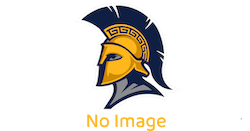
<style>
.page{position:relative;width:250px;height:131px;background:#ffffff}
.page>*{position:absolute;margin:0}
.t1{font:20px "BalooPaaji2-Regular";color:#ffb71b}
</style>
<div class="page">
<p class="t1" style="left:87px;top:114px;width:79px;height:17px">No Image</p>
</div>
